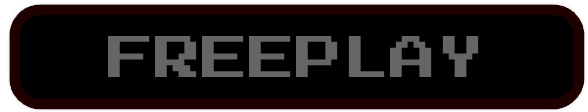
<style>
.page{position:relative;width:588px;height:112px;background:#000000}
.page>*{position:absolute;margin:0}
.t1{font:47px "Super-Mario-Bros.-NES";color:#656565}
</style>
<div class="page">
<p class="t1" style="left:108px;top:35px;width:371px;height:42px">FREEPLAY</p>
</div>
